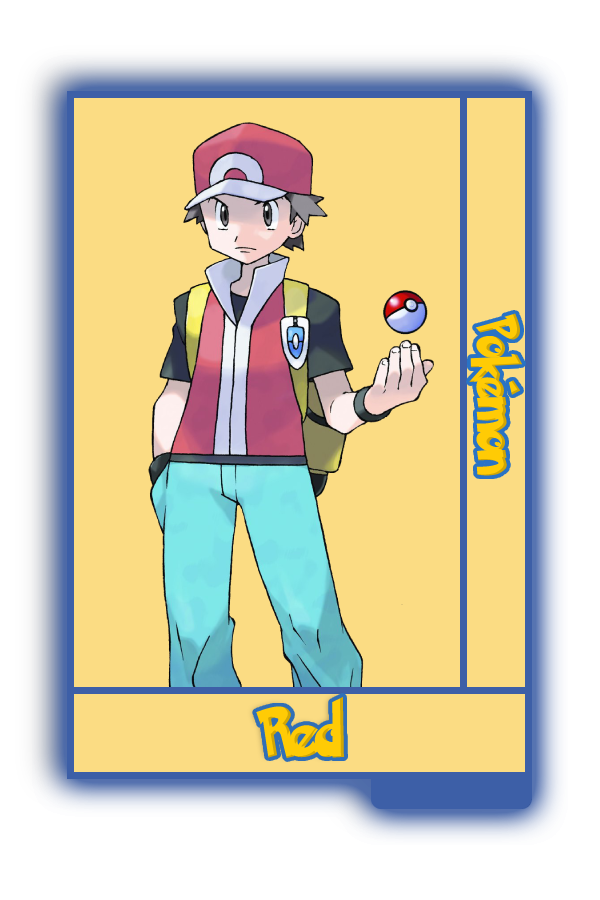
<style>
.page{position:relative;width:600px;height:900px;background:#fbdc83}
.page>*{position:absolute;margin:0}
.t1{font:48.8px "PokemonSolidNormal";color:#ffcb05;scale:0.8 1}
.t2{font:56.6px "PokemonSolidNormal";color:#ffcb05;scale:0.92 1}
</style>
<div class="page">
<p class="t1" style="left:469px;top:313px;width:54px;height:163px;rotate:90deg">Pokémon</p>
<p class="t2" style="left:256px;top:696px;width:88px;height:63px">Red</p>
</div>
